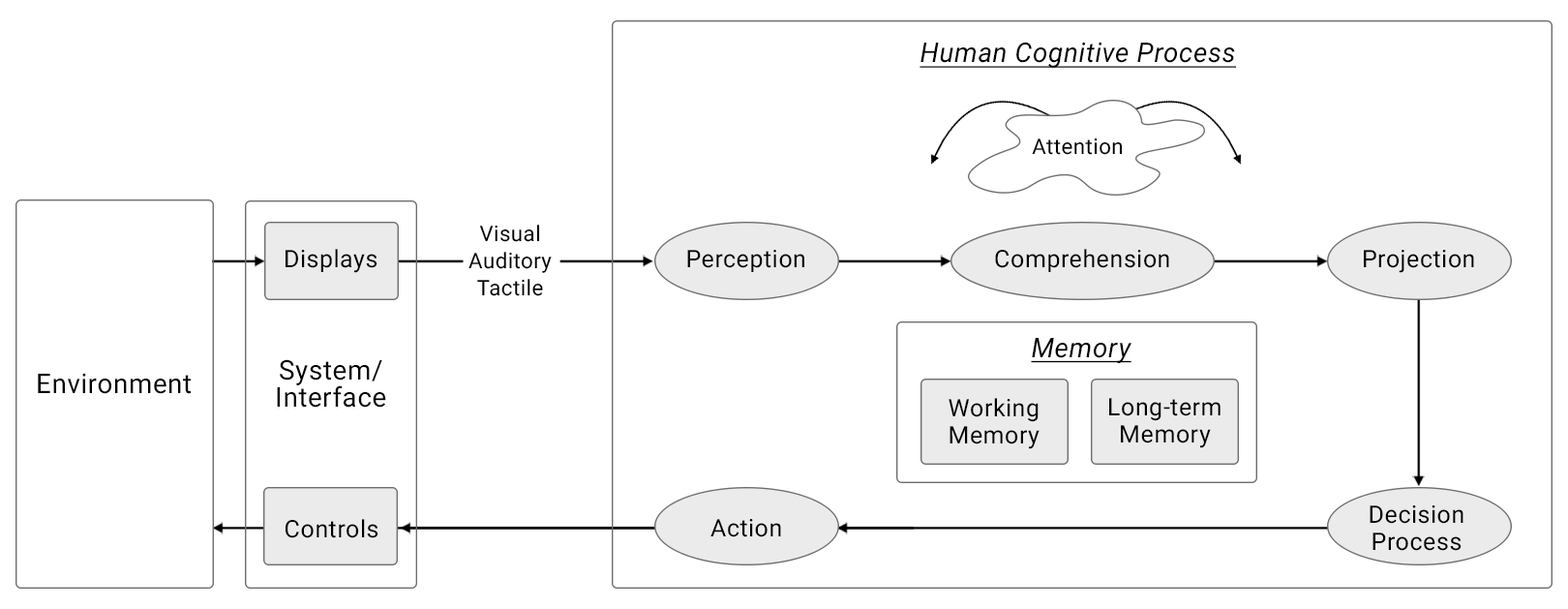
<style>
.page{position:relative;width:1568px;height:609px;background:#ffffff}
.page>*{position:absolute;margin:0}
.t1{font:27px "Roboto-Italic";letter-spacing:0.02em;color:#000000;text-decoration:underline}
.t2{font:21.6px "Roboto-Regular";letter-spacing:0.02em;color:#000000}
.t3{font:21.6px/27px "Roboto-Regular";letter-spacing:0.02em;color:#000000}
.t4{font:24.3px "Roboto-Regular";letter-spacing:0.02em;color:#000000}
.t5{font:27px/27px "Roboto-Regular";letter-spacing:0.02em;color:#000000}
.t6{font:27px "Roboto-Regular";letter-spacing:0.02em;color:#000000}
.t7{font:24.3px/27px "Roboto-Regular";letter-spacing:0.02em;color:#000000}
</style>
<div class="page">
<p class="t1" style="left:920px;top:42px;width:317px;height:26px">Human Cognitive Process</p>
<p class="t2" style="left:1032px;top:138px;width:91px;height:17px">Attention</p>
<p class="t3" style="left:468px;top:225px;width:84px;height:71px;text-align:center">Visual<br>Auditory<br>Tactile</p>
<p class="t4" style="left:286px;top:249px;width:91px;height:24px">Displays</p>
<p class="t4" style="left:687px;top:250px;width:117px;height:22px">Perception</p>
<p class="t4" style="left:995px;top:249px;width:174px;height:23px">Comprehension</p>
<p class="t4" style="left:1364px;top:250px;width:110px;height:23px">Projection</p>
<p class="t1" style="left:1031px;top:338px;width:100px;height:25px">Memory</p>
<p class="t5" style="left:277px;top:359px;width:109px;height:48px;text-align:center">System/<br>Interface</p>
<p class="t6" style="left:38px;top:373px;width:153px;height:21px">Environment</p>
<p class="t7" style="left:949px;top:398px;width:91px;height:51px;text-align:center">Working<br>Memory</p>
<p class="t7" style="left:1109px;top:398px;width:112px;height:50px;text-align:center">Long-term<br>Memory</p>
<p class="t7" style="left:1370px;top:505px;width:93px;height:46px;text-align:center">Decision<br>Process</p>
<p class="t4" style="left:286px;top:519px;width:92px;height:19px">Controls</p>
<p class="t4" style="left:710px;top:519px;width:71px;height:18px">Action</p>
</div>
